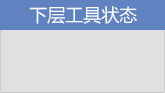
<style>
.page{position:relative;width:165px;height:93px;background:#e0e0df}
.page>*{position:absolute;margin:0}
.t1{font:18px "MicrosoftYaHeiUI";color:#ffffff}
</style>
<div class="page">
<p class="t1" style="left:29px;top:6px;width:108px;height:18px">下层工具状态</p>
</div>
